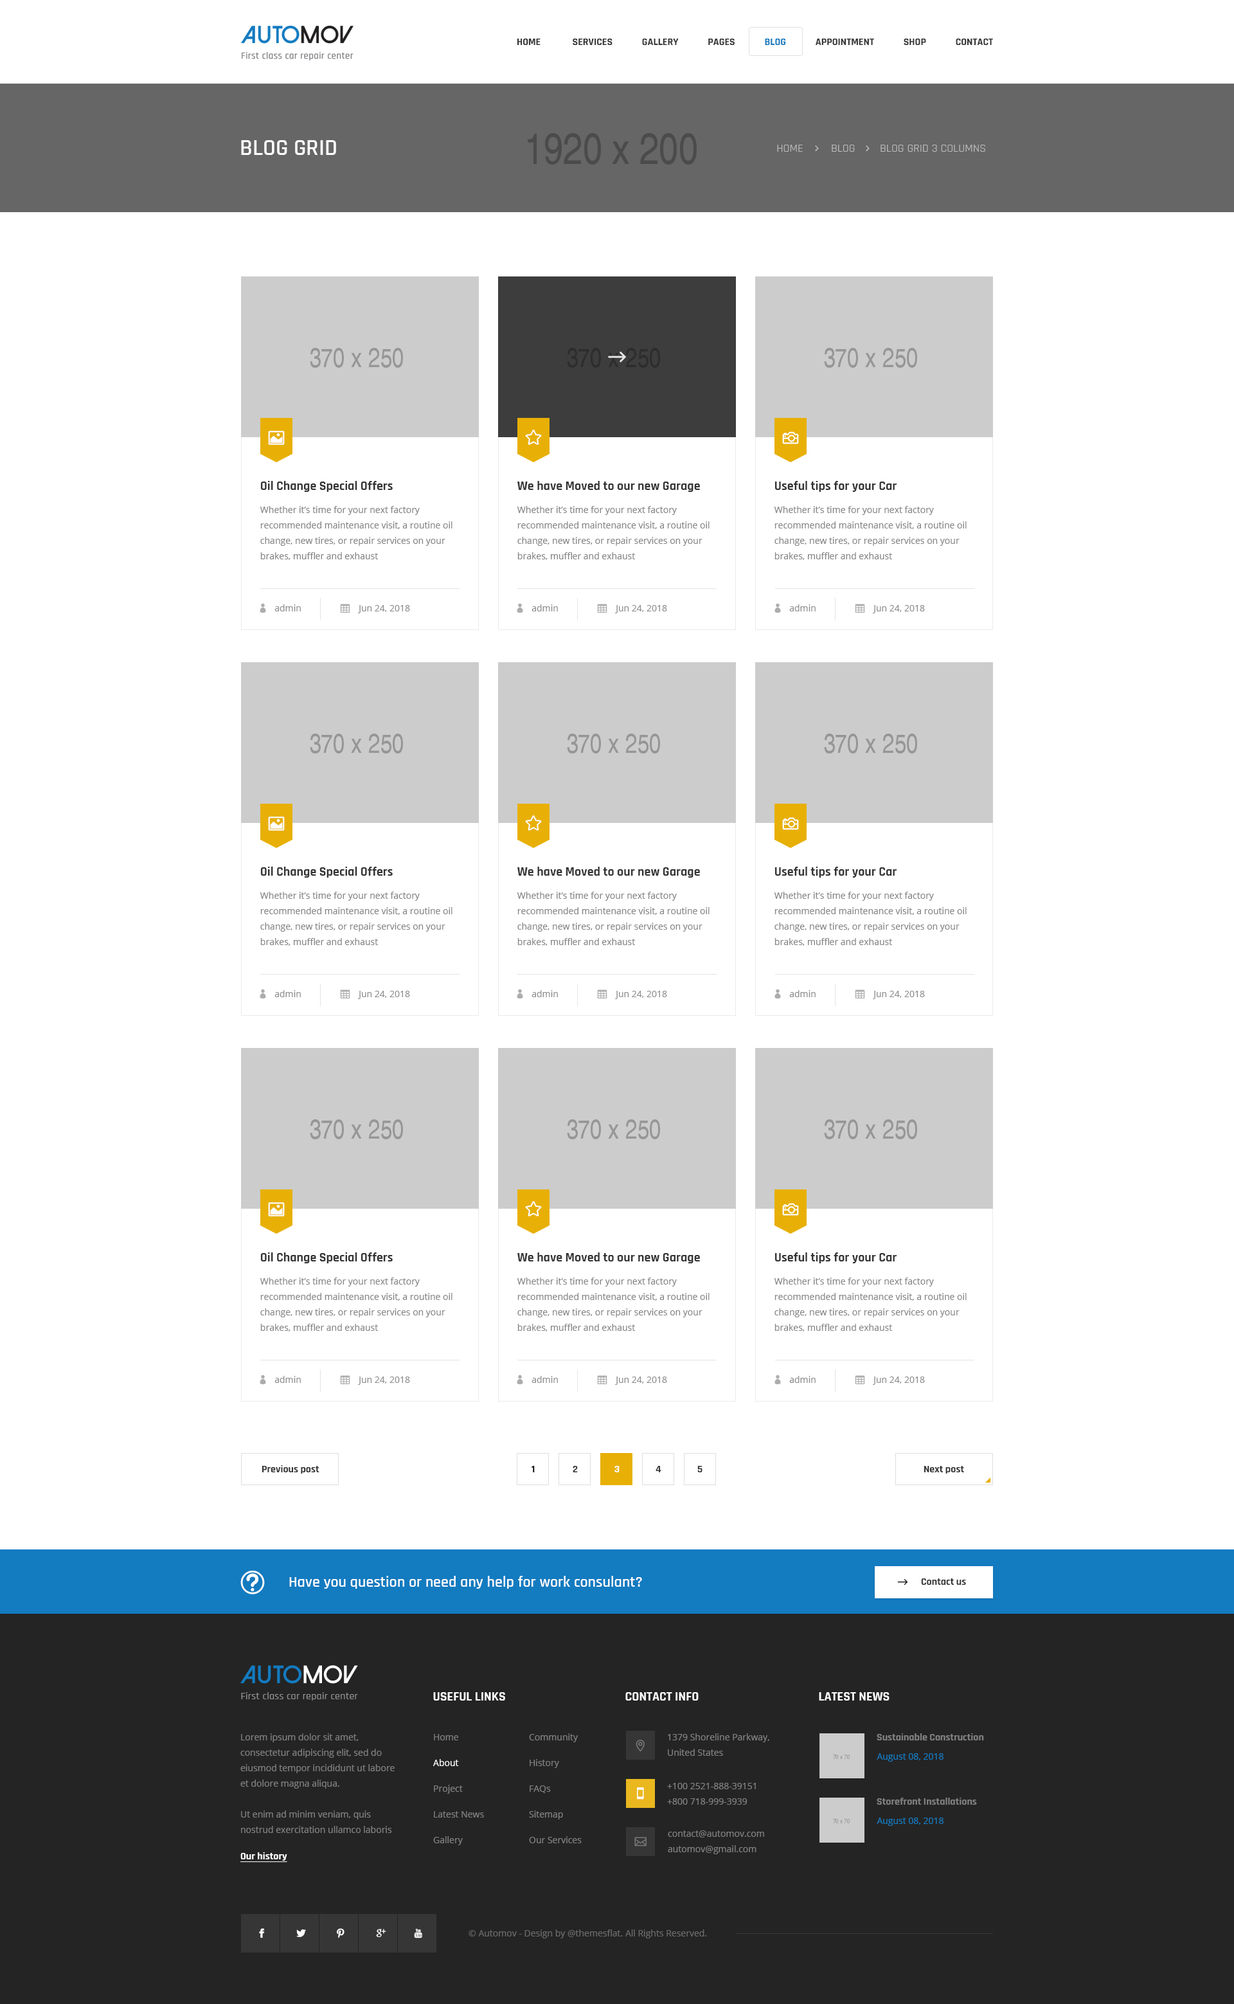
<style>
.page{position:relative;width:1234px;height:2004px;background:#ffffff}
.page>*{position:absolute;margin:0}
.t1{font:10.3px "Rajdhani-Bold";color:#363636;text-transform:uppercase}
.t2{font:10.3px "Rajdhani-Bold";color:#137bc0;text-transform:uppercase}
.t3{font:23.1px "Rajdhani-SemiBold";color:#ffffff;text-transform:uppercase}
.t4{font:11.6px "Rajdhani-Regular";color:#bcbcbc}
.t5{font:12.9px "Rajdhani-Bold";color:#343434}
.t6{font:9px/15.4px "OpenSans";color:#858585}
.t7{font:9px "OpenSans";color:#8d8d8d}
.t8{font:10.3px "Rajdhani-Bold";color:#343434}
.t9{font:10.3px "Rajdhani-Bold";color:#000000}
.t10{font:10.3px "Rajdhani-Bold";color:#ffffff}
.t11{font:15.4px "Rajdhani-SemiBold";color:#ffffff}
.t12{font:10.3px "Rajdhani-Bold";color:#363636}
.t13{font:12.9px "Rajdhani-Bold";color:#ffffff;text-transform:uppercase}
.t14{font:12.9px "Rajdhani-Bold";color:#ffffff}
.t15{font:9px/15.4px "OpenSans";color:#808080}
.t16{font:9px/25.7px "OpenSans";color:#808080}
.t17{font:9px/25.7px "OpenSans";color:#ffffff}
.t18{font:10.3px "Rajdhani-Bold";color:#808080}
.t19{font:9px "OpenSans";color:#137bc0}
.t20{font:10.3px "Rajdhani-Bold";color:#ffffff;text-decoration:underline}
.t21{font:9px "OpenSans";color:#6a6a6a}
</style>
<div class="page">
<p class="t1" style="left:517px;top:39px;width:476px;height:6px">Home              Services             Gallery             Pages       <span class="t2">      Blog    </span>         Appointment             Shop             Contact</p>
<p class="t3" style="left:241px;top:140px;width:95px;height:15px">blog grid</p>
<p class="t4" style="left:777px;top:145px;width:209px;height:7px">HOME         BLOG        BLOG GRID 3 COLUMNS</p>
<p class="t5" style="left:260px;top:481px;width:133px;height:11px">Oil Change Special Offers</p>
<p class="t5" style="left:518px;top:481px;width:182px;height:11px">We have Moved to our new Garage</p>
<p class="t5" style="left:775px;top:481px;width:122px;height:11px">Useful tips for your Car</p>
<p class="t6" style="left:260px;top:506px;width:193px;height:54px">Whether it’s time for your next factory recommended maintenance visit, a routine oil change, new tires, or repair services on your brakes, muffler and exhaust</p>
<p class="t6" style="left:517px;top:506px;width:193px;height:54px">Whether it’s time for your next factory recommended maintenance visit, a routine oil change, new tires, or repair services on your brakes, muffler and exhaust</p>
<p class="t6" style="left:774px;top:506px;width:193px;height:54px">Whether it’s time for your next factory recommended maintenance visit, a routine oil change, new tires, or repair services on your brakes, muffler and exhaust</p>
<p class="t7" style="left:274px;top:604px;width:27px;height:7px">admin</p>
<p class="t7" style="left:358px;top:605px;width:52px;height:8px">Jun 24, 2018</p>
<p class="t7" style="left:532px;top:604px;width:26px;height:7px">admin</p>
<p class="t7" style="left:615px;top:605px;width:52px;height:8px">Jun 24, 2018</p>
<p class="t7" style="left:789px;top:604px;width:27px;height:7px">admin</p>
<p class="t7" style="left:873px;top:605px;width:52px;height:8px">Jun 24, 2018</p>
<p class="t5" style="left:260px;top:867px;width:133px;height:11px">Oil Change Special Offers</p>
<p class="t5" style="left:518px;top:867px;width:182px;height:11px">We have Moved to our new Garage</p>
<p class="t5" style="left:775px;top:867px;width:122px;height:11px">Useful tips for your Car</p>
<p class="t6" style="left:260px;top:892px;width:193px;height:54px">Whether it’s time for your next factory recommended maintenance visit, a routine oil change, new tires, or repair services on your brakes, muffler and exhaust</p>
<p class="t6" style="left:517px;top:892px;width:193px;height:54px">Whether it’s time for your next factory recommended maintenance visit, a routine oil change, new tires, or repair services on your brakes, muffler and exhaust</p>
<p class="t6" style="left:774px;top:892px;width:193px;height:54px">Whether it’s time for your next factory recommended maintenance visit, a routine oil change, new tires, or repair services on your brakes, muffler and exhaust</p>
<p class="t7" style="left:274px;top:990px;width:27px;height:7px">admin</p>
<p class="t7" style="left:358px;top:991px;width:52px;height:8px">Jun 24, 2018</p>
<p class="t7" style="left:532px;top:990px;width:26px;height:7px">admin</p>
<p class="t7" style="left:615px;top:991px;width:52px;height:8px">Jun 24, 2018</p>
<p class="t7" style="left:789px;top:990px;width:27px;height:7px">admin</p>
<p class="t7" style="left:873px;top:991px;width:52px;height:8px">Jun 24, 2018</p>
<p class="t5" style="left:260px;top:1252px;width:133px;height:11px">Oil Change Special Offers</p>
<p class="t5" style="left:518px;top:1252px;width:182px;height:11px">We have Moved to our new Garage</p>
<p class="t5" style="left:775px;top:1252px;width:122px;height:11px">Useful tips for your Car</p>
<p class="t6" style="left:260px;top:1277px;width:193px;height:54px">Whether it’s time for your next factory recommended maintenance visit, a routine oil change, new tires, or repair services on your brakes, muffler and exhaust</p>
<p class="t6" style="left:517px;top:1277px;width:193px;height:54px">Whether it’s time for your next factory recommended maintenance visit, a routine oil change, new tires, or repair services on your brakes, muffler and exhaust</p>
<p class="t6" style="left:774px;top:1277px;width:193px;height:54px">Whether it’s time for your next factory recommended maintenance visit, a routine oil change, new tires, or repair services on your brakes, muffler and exhaust</p>
<p class="t7" style="left:274px;top:1376px;width:27px;height:7px">admin</p>
<p class="t7" style="left:358px;top:1376px;width:52px;height:9px">Jun 24, 2018</p>
<p class="t7" style="left:532px;top:1376px;width:26px;height:7px">admin</p>
<p class="t7" style="left:615px;top:1376px;width:52px;height:9px">Jun 24, 2018</p>
<p class="t7" style="left:789px;top:1376px;width:27px;height:7px">admin</p>
<p class="t7" style="left:873px;top:1376px;width:52px;height:9px">Jun 24, 2018</p>
<p class="t8" style="left:262px;top:1465px;width:58px;height:8px">Previous post</p>
<p class="t9" style="left:532px;top:1466px;width:3px;height:6px">1</p>
<p class="t8" style="left:573px;top:1466px;width:5px;height:6px">2</p>
<p class="t10" style="left:615px;top:1466px;width:5px;height:6px">3</p>
<p class="t8" style="left:656px;top:1466px;width:6px;height:6px">4</p>
<p class="t8" style="left:698px;top:1466px;width:5px;height:6px">5</p>
<p class="t8" style="left:924px;top:1466px;width:40px;height:7px">Next post</p>
<p class="t11" style="left:289px;top:1576px;width:353px;height:13px">Have you question or need any help for work consulant?</p>
<p class="t12" style="left:921px;top:1578px;width:45px;height:7px">Contact us</p>
<p class="t13" style="left:433px;top:1692px;width:72px;height:8px">Useful Links</p>
<p class="t14" style="left:626px;top:1692px;width:73px;height:8px">CONTACT INFO</p>
<p class="t13" style="left:819px;top:1692px;width:71px;height:8px">Latest news</p>
<p class="t15" style="left:240px;top:1733px;width:155px;height:100px">Lorem ipsum dolor sit amet, consectetur adipiscing elit, sed do eiusmod tempor incididunt ut labore et dolore magna aliqua. <br><br>Ut enim ad minim veniam, quis nostrud exercitation ullamco laboris nisi</p>
<p class="t16" style="left:433px;top:1734px;width:51px;height:111px">Home<br><span class="t17">About<br></span>Project<br>Latest News<br>Gallery</p>
<p class="t16" style="left:529px;top:1733px;width:53px;height:110px">Community<br>History<br>FAQs<br>Sitemap<br>Our Services</p>
<p class="t15" style="left:668px;top:1733px;width:102px;height:23px">1379 Shoreline Parkway, <br>United States</p>
<p class="t18" style="left:877px;top:1733px;width:107px;height:7px">Sustainable Construction</p>
<p class="t19" style="left:877px;top:1753px;width:67px;height:8px">August 08, 2018</p>
<p class="t15" style="left:667px;top:1783px;width:89px;height:22px">+100 2521-888-39151<br>+800 718-999-3939</p>
<p class="t18" style="left:877px;top:1797px;width:100px;height:8px">Storefront Installations</p>
<p class="t19" style="left:877px;top:1817px;width:67px;height:9px">August 08, 2018</p>
<p class="t15" style="left:668px;top:1830px;width:96px;height:24px">contact@automov.com<br>automov@gmail.com</p>
<p class="t20" style="left:240px;top:1852px;width:47px;height:10px">Our history</p>
<p class="t21" style="left:469px;top:1929px;width:237px;height:9px">© Automov - Design by @themesflat. All Rights Reserved.</p>
</div>
